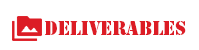
<style>
.page{position:relative;width:199px;height:50px;background:#ffffff}
.page>*{position:absolute;margin:0}
.t1{font:18px "StencilStd";color:#dc1c25}
</style>
<div class="page">
<p class="t1" style="left:45px;top:21px;width:141px;height:14px">DELIVERABLES</p>
</div>
